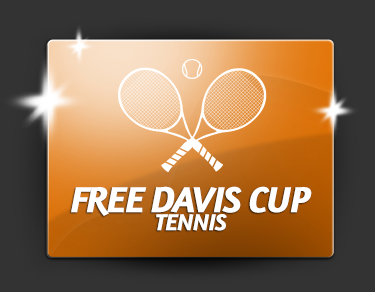
<style>
.page{position:relative;width:375px;height:292px;background:#333333}
.page>*{position:absolute;margin:0}
.t1{font:37.5px/45px "Amaranth-BoldItalic";letter-spacing:-0.03em;color:#ffffff}
.t2{font:24px/18px "Amaranth-BoldItalic";letter-spacing:-0.03em;color:#ffffff}
</style>
<div class="page">
<p class="t1" style="left:71px;top:186px;width:241px;height:45px;text-align:center">FREE DAVIS CUP<br><span class="t2">TENNIS</span></p>
</div>
